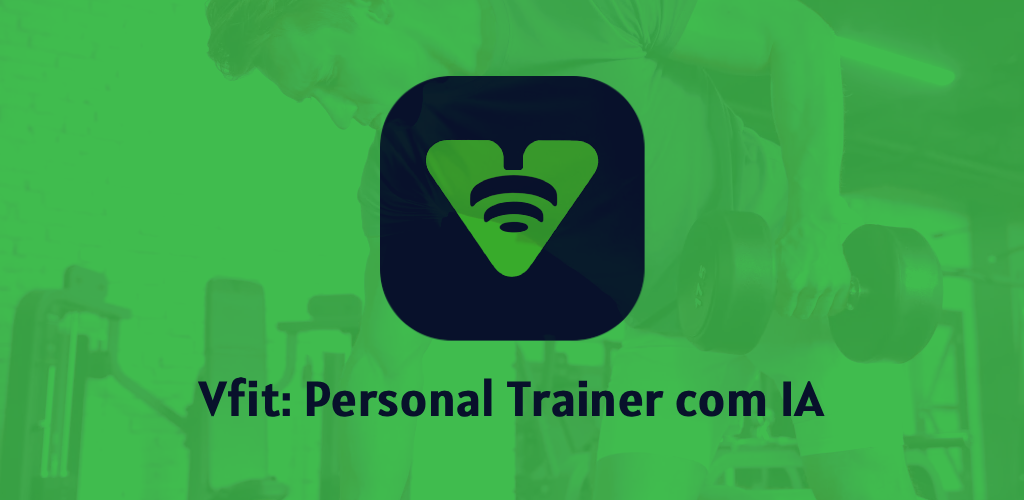
<style>
.page{position:relative;width:1024px;height:500px;background:#40bc4e}
.page>*{position:absolute;margin:0}
.t1{font:49.5px "Alatsi-Regular";color:#08112b;font-weight:bold}
</style>
<div class="page">
<p class="t1" style="left:198px;top:377px;width:627px;height:40px">Vfit: Personal Trainer com IA</p>
</div>
